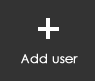
<style>
.page{position:relative;width:95px;height:81px;background:#333333}
.page>*{position:absolute;margin:0}
.t1{font:12.5px "CenturyGothic";color:#ffffff;font-weight:bold}
</style>
<div class="page">
<p class="t1" style="left:21px;top:53px;width:57px;height:11px">Add user</p>
</div>
